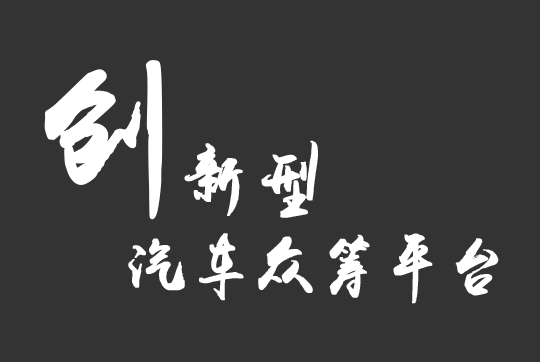
<style>
.page{position:relative;width:540px;height:362px;background:#333333}
.page>*{position:absolute;margin:0}
.t1{font:150px "yuweij";letter-spacing:0.04em;color:#ffffff;font-weight:bold}
.t2{font:72px "yuweij";letter-spacing:0.04em;color:#ffffff;font-weight:bold}
.t3{font:60px "yuweij";letter-spacing:0.04em;color:#ffffff;font-weight:bold}
</style>
<div class="page">
<p class="t1" style="left:44px;top:60px;width:119px;height:160px">创</p>
<p class="t2" style="left:184px;top:140px;width:134px;height:78px">新型</p>
<p class="t3" style="left:128px;top:233px;width:371px;height:71px"><span class="t2"><br></span>汽车众筹平台</p>
</div>
